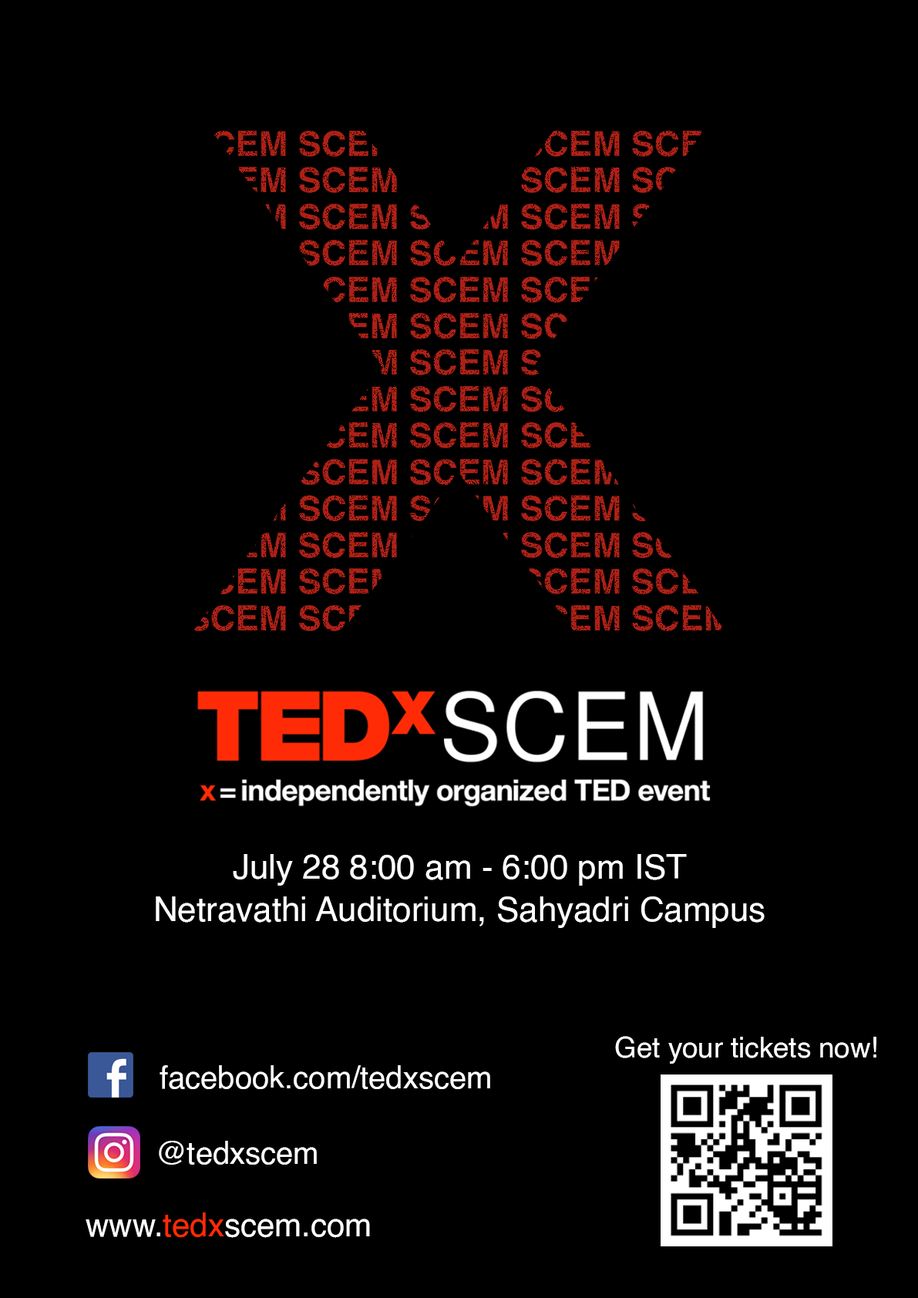
<style>
.page{position:relative;width:918px;height:1298px;background:#000000}
.page>*{position:absolute;margin:0}
.t1{font:33.9px/49px "Helvetica";color:#ffffff}
.t2{font:28.3px "Helvetica";color:#ffffff}
.t3{font:30.8px "Helvetica";color:#ffffff}
.t4{font:32.4px "Helvetica";color:#ffffff}
.t5{font:32.4px "Helvetica";color:#ff2b06}
</style>
<div class="page">
<p class="t1" style="left:156px;top:854px;width:609px;height:74px;text-align:center">July 28 8:00 am - 6:00 pm IST<br>Netravathi Auditorium, Sahyadri Campus</p>
<p class="t2" style="left:615px;top:1036px;width:262px;height:28px">Get your tickets now!</p>
<p class="t3" style="left:160px;top:1066px;width:330px;height:24px">facebook.com/tedxscem</p>
<p class="t3" style="left:159px;top:1141px;width:158px;height:24px">@tedxscem</p>
<p class="t4" style="left:86px;top:1213px;width:284px;height:25px">www.<span class="t5">tedx</span>scem.com</p>
</div>
